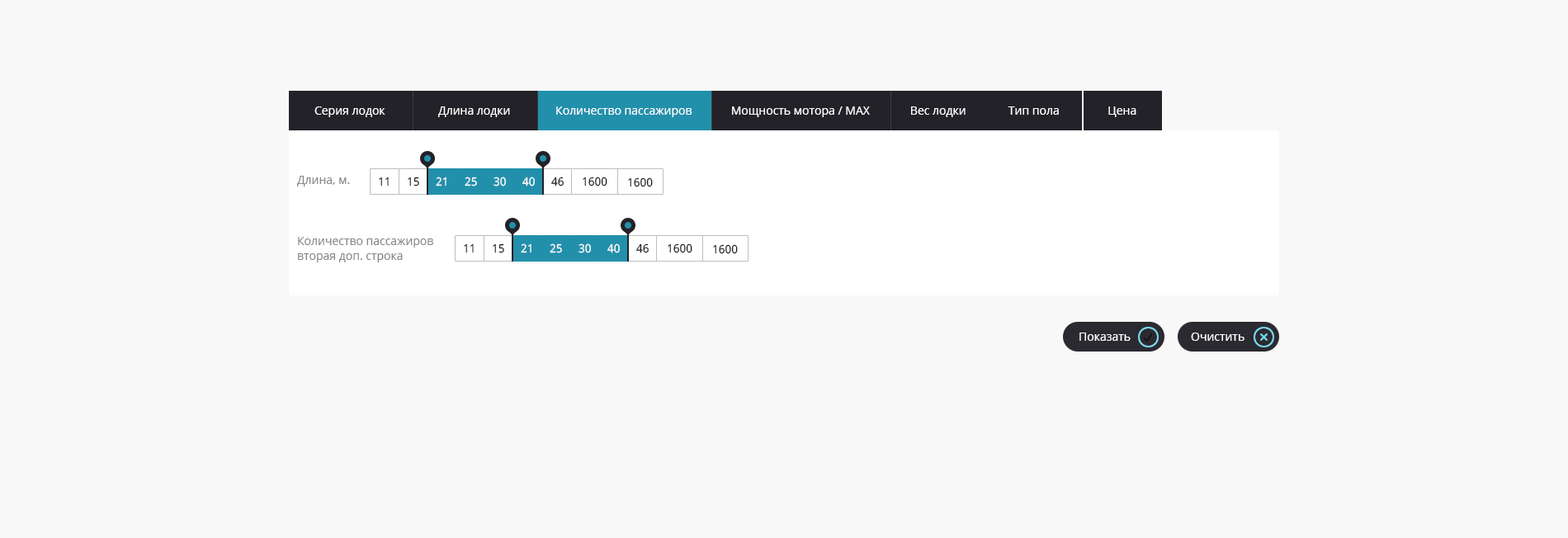
<style>
.page{position:relative;width:1568px;height:538px;background:#f8f8f8}
.page>*{position:absolute;margin:0}
.t1{font:11.6px "OpenSans";color:#ffffff}
.t2{font:11.6px "OpenSans";color:#888888}
.t3{font:11.6px "NotoSans"}
.t4{font:11.6px "NotoSans";color:#202020}
.t5{font:11.6px "NotoSans";color:#fffefe}
.t6{font:11.6px "NotoSans";color:#ffffff}
.t7{font:11.6px/14.9px "OpenSans";color:#888888}
</style>
<div class="page">
<p class="t1" style="left:314px;top:106px;width:71px;height:11px">Серия лодок</p>
<p class="t1" style="left:438px;top:106px;width:72px;height:11px">Длина лодки</p>
<p class="t1" style="left:556px;top:106px;width:136px;height:11px">Количество пассажиров</p>
<p class="t1" style="left:732px;top:106px;width:138px;height:11px">Мощность мотора / MAX</p>
<p class="t1" style="left:911px;top:106px;width:55px;height:11px">Вес лодки</p>
<p class="t1" style="left:1008px;top:106px;width:51px;height:9px">Тип пола</p>
<p class="t1" style="left:1108px;top:106px;width:28px;height:11px">Цена</p>
<p class="t2" style="left:297px;top:176px;width:53px;height:11px">Длина, м.</p>
<p class="t3" style="left:379px;top:177px;width:10px;height:10px">11</p>
<p class="t4" style="left:408px;top:177px;width:11px;height:10px">15</p>
<p class="t5" style="left:436px;top:177px;width:10px;height:10px">21</p>
<p class="t5" style="left:465px;top:177px;width:12px;height:10px">25</p>
<p class="t6" style="left:494px;top:177px;width:12px;height:10px">30</p>
<p class="t6" style="left:522px;top:177px;width:13px;height:10px">40</p>
<p class="t4" style="left:551px;top:177px;width:13px;height:10px">46</p>
<p class="t4" style="left:583px;top:177px;width:24px;height:10px">1600</p>
<p class="t4" style="left:628px;top:177px;width:25px;height:10px">1600</p>
<p class="t7" style="left:298px;top:237px;width:135px;height:25px">Количество пассажиров<br>вторая доп. строка</p>
<p class="t3" style="left:464px;top:243px;width:10px;height:10px">11</p>
<p class="t4" style="left:493px;top:243px;width:11px;height:10px">15</p>
<p class="t5" style="left:521px;top:243px;width:10px;height:10px">21</p>
<p class="t5" style="left:550px;top:243px;width:12px;height:10px">25</p>
<p class="t6" style="left:579px;top:243px;width:12px;height:10px">30</p>
<p class="t6" style="left:607px;top:243px;width:13px;height:10px">40</p>
<p class="t4" style="left:636px;top:243px;width:13px;height:10px">46</p>
<p class="t4" style="left:668px;top:243px;width:24px;height:10px">1600</p>
<p class="t4" style="left:713px;top:244px;width:25px;height:10px">1600</p>
<p class="t1" style="left:1079px;top:333px;width:52px;height:8px">Показать</p>
<p class="t1" style="left:1191px;top:333px;width:53px;height:8px">Очистить</p>
</div>
